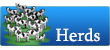
<style>
.page{position:relative;width:110px;height:50px;background:#ffffff}
.page>*{position:absolute;margin:0}
.t1{font:18px "Sylfaen";color:#ffffff}
</style>
<div class="page">
<p class="t1" style="left:56px;top:28px;width:44px;height:14px">Herds</p>
</div>
